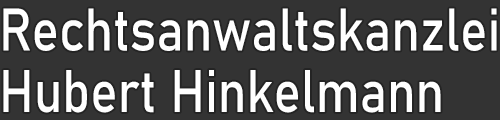
<style>
.page{position:relative;width:500px;height:120px;background:#333333}
.page>*{position:absolute;margin:0}
.t1{font:59px "Bahnschrift";color:#ffffff;scale:0.87 1}
</style>
<div class="page">
<p class="t1" style="left:3px;top:8px;width:494px;height:105px">Rechtsanwaltskanzlei<br>Hubert Hinkelmann</p>
</div>
